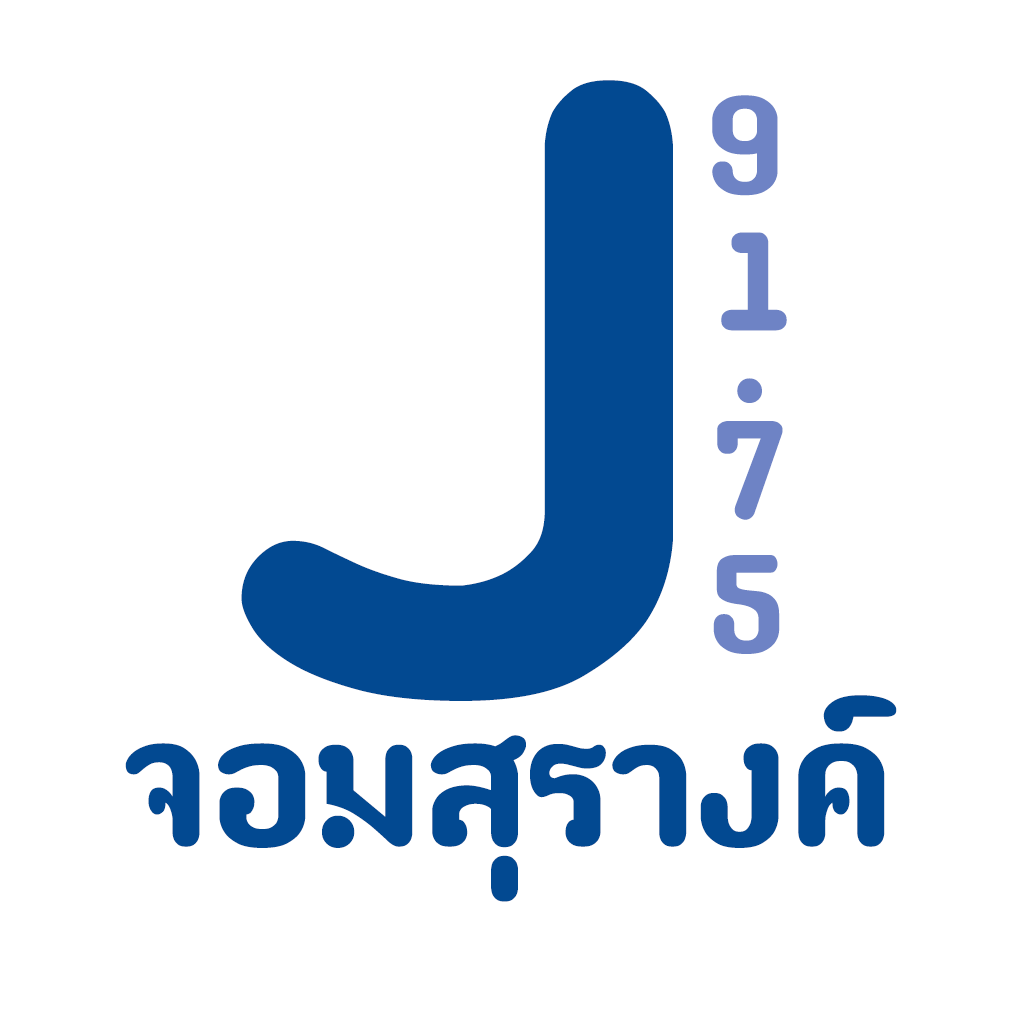
<style>
.page{position:relative;width:1024px;height:1024px;background:#ffffff}
.page>*{position:absolute;margin:0}
.t1{font:1279.4px "paaymaay";color:#024991}
.t2{font:203.5px "paaymaay";color:#6e83c5}
.t3{font:267.7px "paaymaay";color:#024991}
</style>
<div class="page">
<p class="t1" style="left:241px;top:80px;width:432px;height:621px">J</p>
<p class="t2" style="left:712px;top:95px;width:66px;height:101px">9</p>
<p class="t2" style="left:721px;top:232px;width:66px;height:99px">1</p>
<p class="t2" style="left:737px;top:378px;width:25px;height:25px">.</p>
<p class="t2" style="left:717px;top:421px;width:66px;height:99px">7</p>
<p class="t2" style="left:713px;top:555px;width:67px;height:99px">5</p>
<p class="t3" style="left:125px;top:695px;width:772px;height:207px">จอมสุรางค์</p>
</div>
